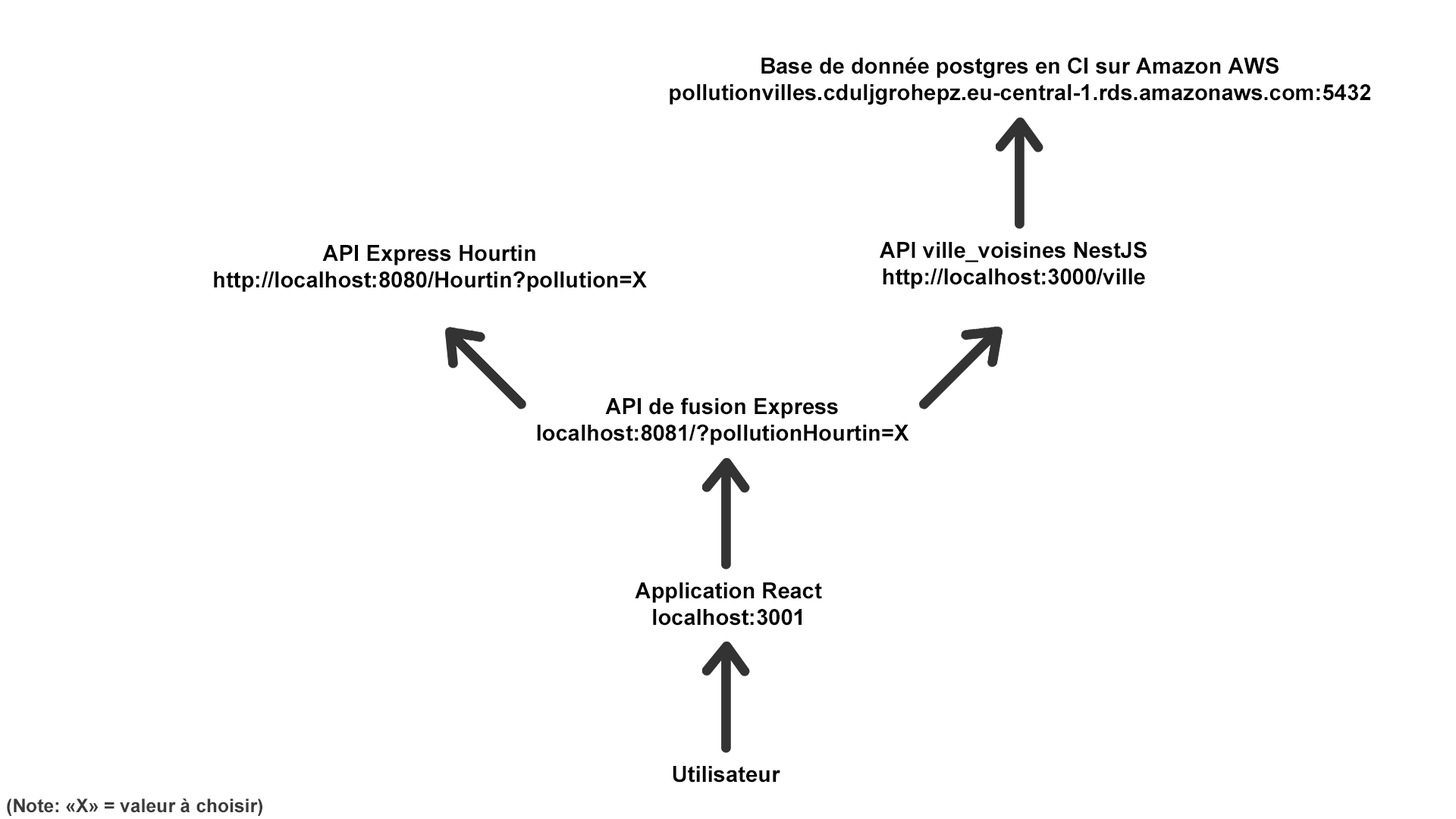
<style>
.page{position:relative;width:1456px;height:819px;background:#ffffff}
.page>*{position:absolute;margin:0}
.t1{font:22.1px "Arial-BoldMT";color:#000000}
.t2{font:18.7px "Arial-BoldMT";color:#3a3a3a}
</style>
<div class="page">
<p class="t1" style="left:670px;top:57px;width:700px;height:48px;text-align:center">Base de donnée postgres en CI sur Amazon AWS<br>pollutionvilles.cduljgrohepz.eu-central-1.rds.amazonaws.com:5432</p>
<p class="t1" style="left:214px;top:245px;width:433px;height:47px;text-align:center">API Express Hourtin<br>http://localhost:8080/Hourtin?pollution=X</p>
<p class="t1" style="left:880px;top:241px;width:267px;height:48px;text-align:center">API ville_voisines NestJS<br>http://localhost:3000/ville</p>
<p class="t1" style="left:537px;top:397px;width:372px;height:48px;text-align:center">API de fusion Express<br>localhost:8081/?pollutionHourtin=X</p>
<p class="t1" style="left:635px;top:582px;width:187px;height:44px;text-align:center">Application React<br>localhost:3001</p>
<p class="t1" style="left:673px;top:766px;width:107px;height:17px">Utilisateur</p>
<p class="t2" style="left:7px;top:799px;width:255px;height:17px">(Note: «X» = valeur à choisir)</p>
</div>
